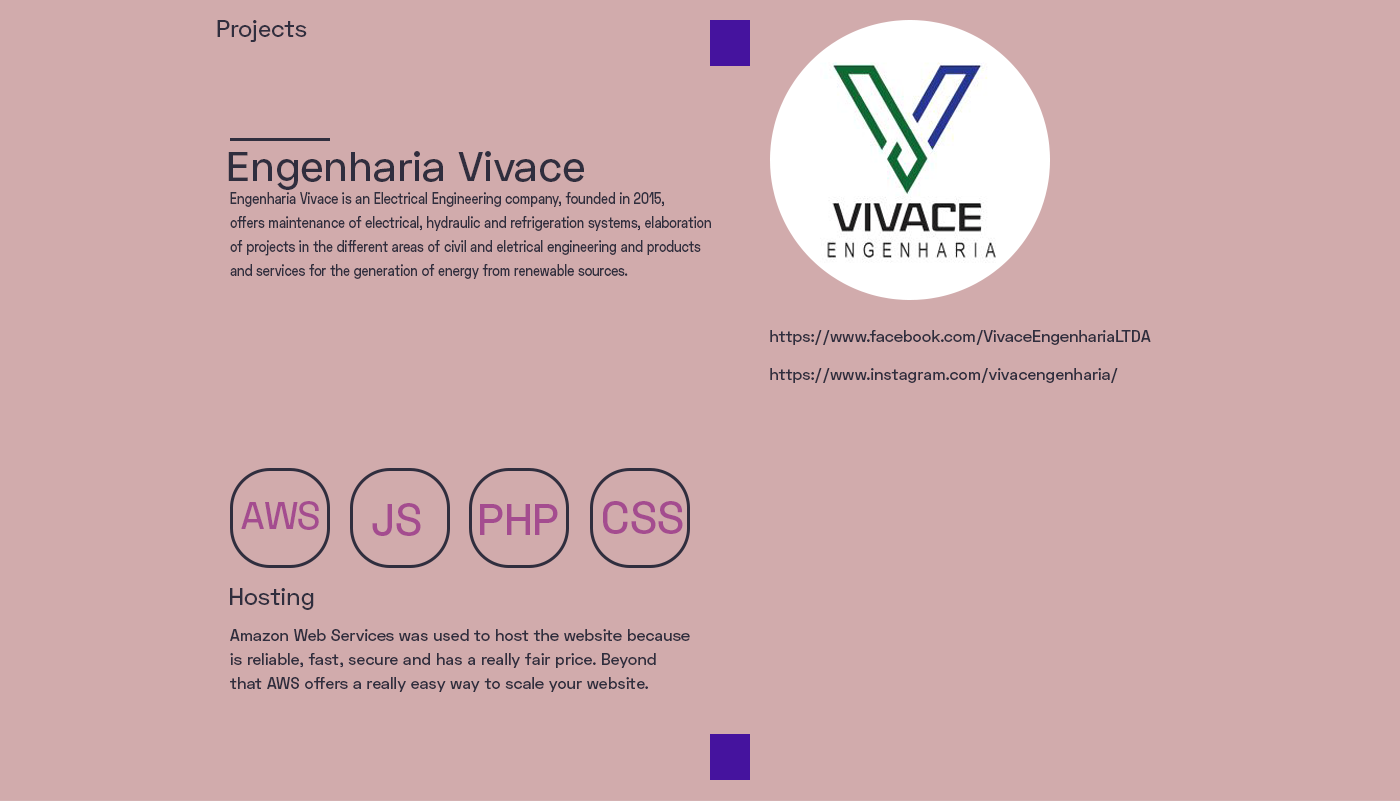
<style>
.page{position:relative;width:1400px;height:801px;background:#d1abac}
.page>*{position:absolute;margin:0}
.t1{font:24px "SpaceGrotesk-Medium";color:#302e3e}
.t2{font:42px "SpaceGrotesk-Medium";color:#302e3e}
.t3{font:16px/24px "SpaceGrotesk-Medium";color:#302e3e;scale:0.79 1}
.t4{font:16px "SpaceGrotesk-Medium";color:#302e3e}
.t5{font:38.7px "SpaceGrotesk-Medium";color:#a44c8f}
.t6{font:44.8px "SpaceGrotesk-Medium";color:#a44c8f}
.t7{font:16px/24px "SpaceGrotesk-Medium";color:#302e3e}
</style>
<div class="page">
<p class="t1" style="left:217px;top:20px;width:90px;height:22px">Projects</p>
<p class="t2" style="left:228px;top:151px;width:356px;height:39px">Engenharia Vivace</p>
<p class="t3" style="left:230px;top:192px;width:481px;height:87px">Engenharia Vivace is an Electrical Engineering company, founded in 2015, <br>offers maintenance of electrical, hydraulic and refrigeration systems, elaboration <br>of projects in the different areas of civil and eletrical engineering and products<br>and services for the generation of energy from renewable sources.</p>
<p class="t4" style="left:770px;top:330px;width:381px;height:15px">https://www.facebook.com/VivaceEngenhariaLTDA</p>
<p class="t4" style="left:770px;top:368px;width:348px;height:15px">https://www.instagram.com/vivacengenharia/</p>
<p class="t5" style="left:241px;top:501px;width:78px;height:29px">AWS</p>
<p class="t6" style="left:372px;top:503px;width:49px;height:33px">JS</p>
<p class="t6" style="left:480px;top:504px;width:78px;height:31px">PHP</p>
<p class="t6" style="left:603px;top:501px;width:80px;height:33px">CSS</p>
<p class="t1" style="left:230px;top:588px;width:84px;height:22px">Hosting</p>
<p class="t7" style="left:230px;top:629px;width:460px;height:63px">Amazon Web Services was used to host the website because is reliable, fast, secure and has a really fair price. Beyond that AWS offers a really easy way to scale your website.</p>
</div>
